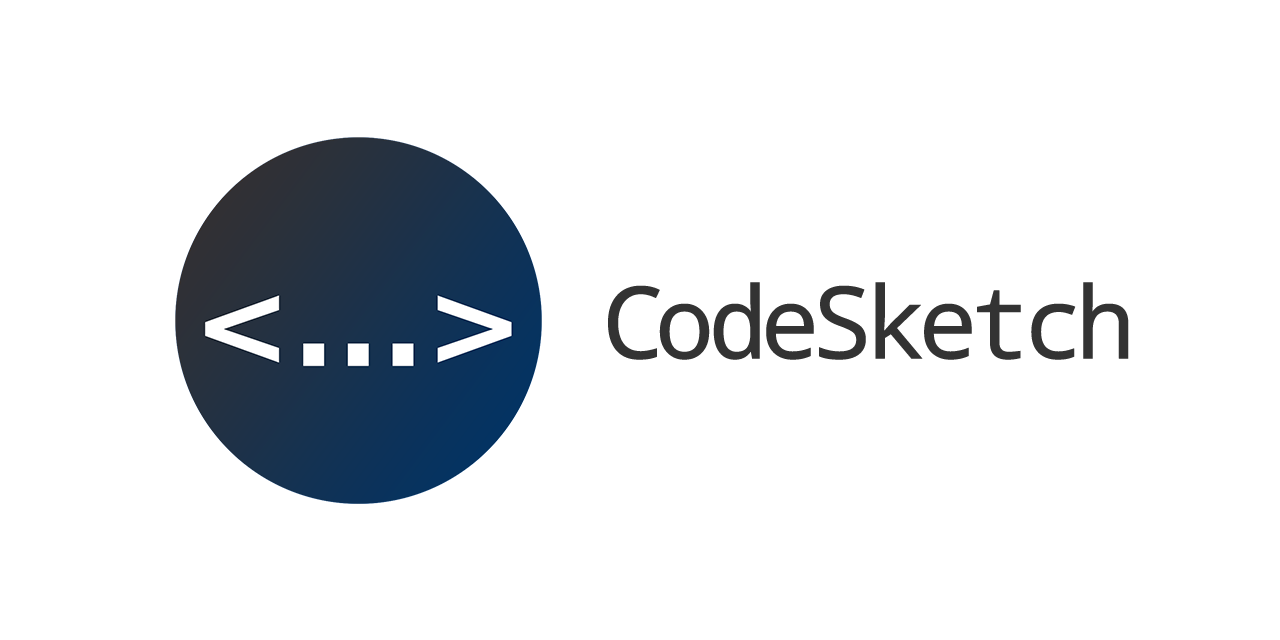
<style>
.page{position:relative;width:1280px;height:640px;background:#ffffff}
.page>*{position:absolute;margin:0}
.t1{font:99.9px "DroidSansMono";letter-spacing:-0.1em;color:#333333;font-weight:bold}
</style>
<div class="page">
<p class="t1" style="left:608px;top:282px;width:521px;height:78px">CodeSketch</p>
</div>
